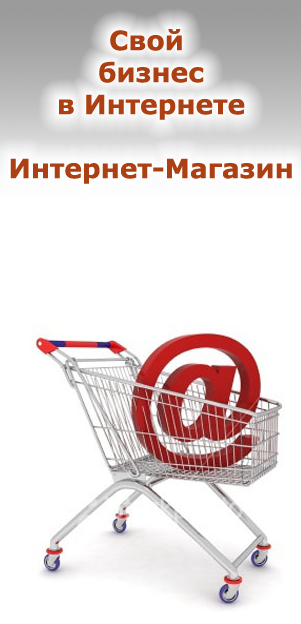
<style>
.page{position:relative;width:301px;height:624px;background:#ffffff}
.page>*{position:absolute;margin:0}
.t1{font:26.7px "Verdana-Bold";color:#ac4012}
</style>
<div class="page">
<p class="t1" style="left:10px;top:29px;width:282px;height:155px;text-align:center">Свой <br>бизнес<br>в Интернете<br><br>Интернет-Магазин</p>
</div>
